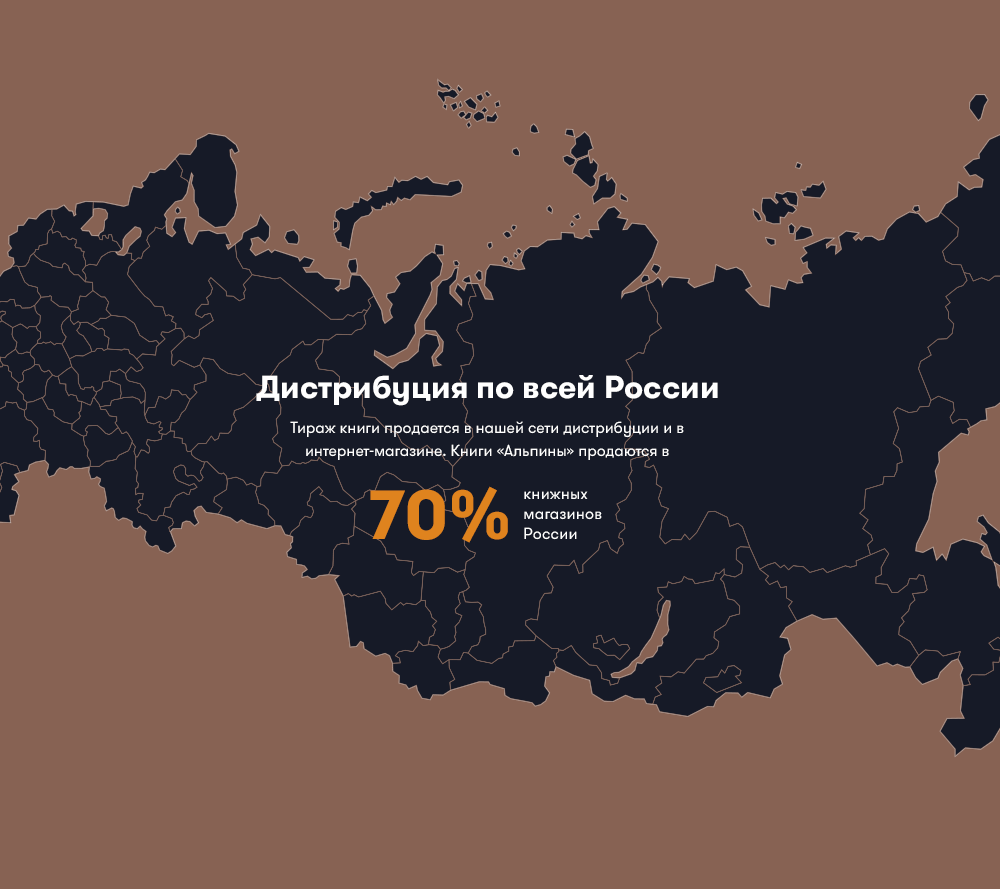
<style>
.page{position:relative;width:1000px;height:889px;background:#876253}
.page>*{position:absolute;margin:0}
.t1{font:32px "GTWalsheimProBold";color:#ffffff}
.t2{font:16px/23px "GTWalsheimProRegular";color:#ffffff}
.t3{font:69px "GTWalsheimProBold";color:#df831e}
.t4{font:16px/20px "GTWalsheimProRegular";color:#ffffff}
</style>
<div class="page">
<p class="t1" style="left:256px;top:375px;width:462px;height:31px">Дистрибуция по всей России</p>
<p class="t2" style="left:290px;top:421px;width:394px;height:39px;text-align:center">Тираж книги продается в нашей сети дистрибуции и в интернет-магазине. Книги «Альпины» продаются в</p>
<p class="t3" style="left:370px;top:486px;width:138px;height:57px">70%</p>
<p class="t4" style="left:524px;top:491px;width:78px;height:49px">книжных магазинов России</p>
</div>
